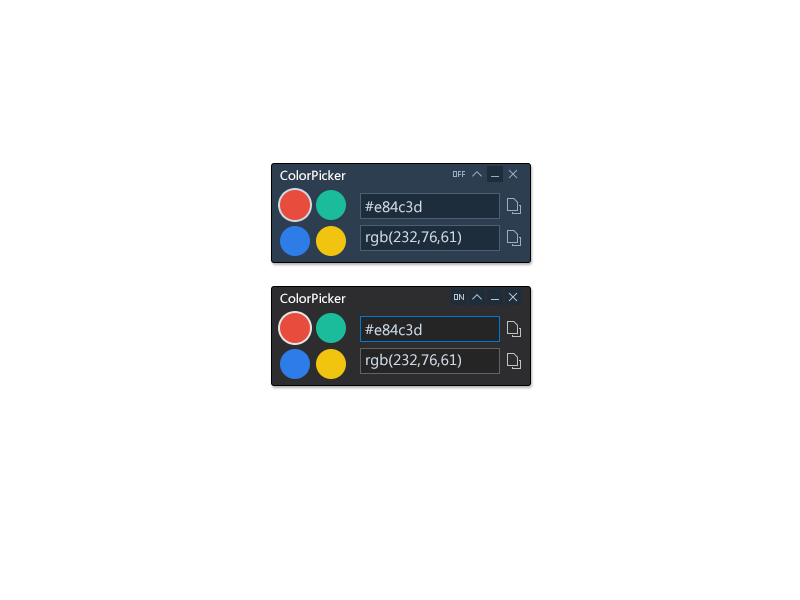
<style>
.page{position:relative;width:800px;height:600px;background:#ffffff}
.page>*{position:absolute;margin:0}
.t1{font:12px "MicrosoftYaHei";color:#ffffff}
.t2{font:14px "MicrosoftYaHei";color:#cdd9e7}
</style>
<div class="page">
<p class="t1" style="left:280px;top:170px;width:66px;height:10px">ColorPicker</p>
<p class="t2" style="left:365px;top:200px;width:57px;height:13px">#e84c3d</p>
<p class="t2" style="left:366px;top:230px;width:95px;height:16px">rgb(232,76,61)</p>
<p class="t1" style="left:280px;top:293px;width:66px;height:10px">ColorPicker</p>
<p class="t2" style="left:365px;top:323px;width:57px;height:13px">#e84c3d</p>
<p class="t2" style="left:366px;top:353px;width:95px;height:16px">rgb(232,76,61)</p>
</div>
